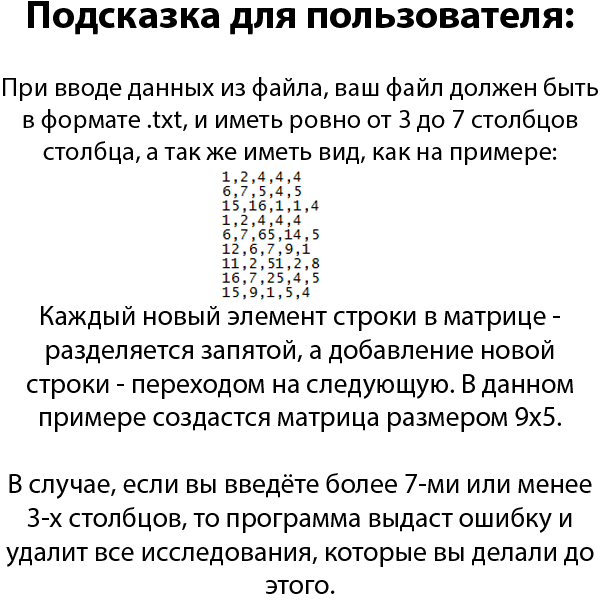
<style>
.page{position:relative;width:600px;height:600px;background:#ffffff}
.page>*{position:absolute;margin:0}
.t1{font:26.7px "MyriadPro-Regular";color:#000000}
.t2{font:40px "MyriadPro-Bold";color:#000000}
.t3{font:28px "MyriadPro-Regular";color:#000000}
</style>
<div class="page">
<p class="t1" style="left:3px;top:1px;width:595px;height:164px;text-align:center"><span class="t2">Подсказка для пользователя: <br><br></span>При вводе данных из файла, ваш файл должен быть в формате .txt, и иметь ровно от 3 до 7 столбцов столбца, а так же иметь вид, как на примере:</p>
<p class="t3" style="left:6px;top:306px;width:588px;height:288px;text-align:center">Каждый новый элемент строки в матрице - разделяется запятой, а добавление новой строки - переходом на следующую. В данном примере создастся матрица размером 9х5.<br><br>В случае, если вы введёте более 7-ми или менее 3-х столбцов, то программа выдаст ошибку и удалит все исследования, которые вы делали до этого.</p>
</div>
